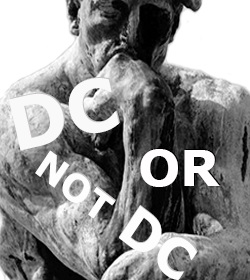
<style>
.page{position:relative;width:250px;height:280px}
.page>*{position:absolute;margin:0}
.t1{font:72px "Verdana-Bold";color:#faf9f9;font-variant:small-caps}
.t2{font:53.1px "Verdana-Bold";color:#fefdfd;font-variant:small-caps}
.t3{font:72px "Verdana-Bold";color:#fffdfd;font-variant:small-caps}
</style>
<div class="page">
<p class="t1" style="left:9px;top:78px;width:110px;height:73px;rotate:-13deg">DC</p>
<p class="t1" style="left:10px;top:77px;width:110px;height:73px;rotate:-13deg">DC</p>
<p class="t2" style="left:35px;top:150px;width:163px;height:130px;rotate:38deg">not DC</p>
<p class="t2" style="left:35px;top:150px;width:162px;height:131px;rotate:38deg">not DC</p>
<p class="t3" style="left:140px;top:149px;width:80px;height:38px">or</p>
<p class="t3" style="left:141px;top:148px;width:80px;height:38px">or</p>
</div>
